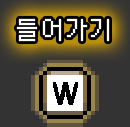
<style>
.page{position:relative;width:130px;height:127px;background:#333333}
.page>*{position:absolute;margin:0}
.t1{font:36px "Silver";color:#ffffff}
</style>
<div class="page">
<p class="t1" style="left:16px;top:18px;width:94px;height:24px">들어가기</p>
</div>
